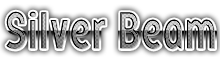
<style>
.page{position:relative;width:220px;height:60px;background:#ffffff}
.page>*{position:absolute;margin:0}
.t1{font:46px "Sister-Medium";scale:0.86 1}
</style>
<div class="page">
<p class="t1" style="left:6px;top:11px;width:209px;height:39px">Silver Beam</p>
</div>
